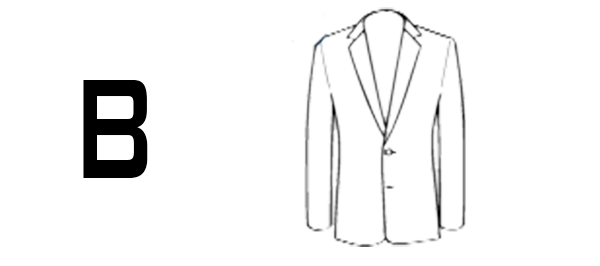
<style>
.page{position:relative;width:600px;height:266px;background:#ffffff}
.page>*{position:absolute;margin:0}
.t1{font:231px "BankGothicBT-Medium";color:#000000;scale:0.57 1}
</style>
<div class="page">
<p class="t1" style="left:83px;top:80px;width:65px;height:98px">b</p>
</div>
